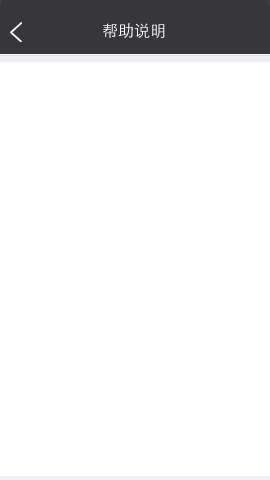
<style>
.page{position:relative;width:270px;height:480px;background:#ffffff}
.page>*{position:absolute;margin:0}
.t1{font:16px "STXihei";color:#ffffff}
</style>
<div class="page">
<p class="t1" style="left:103px;top:23px;width:62px;height:15px">帮助说明</p>
</div>
